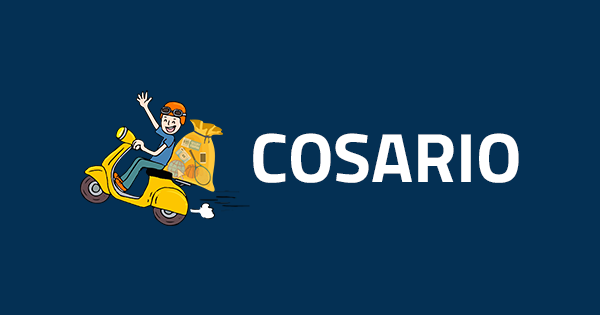
<style>
.page{position:relative;width:600px;height:315px;background:#043054}
.page>*{position:absolute;margin:0}
.t1{font:70px "TitilliumWeb-Bold";color:#ffffff}
</style>
<div class="page">
<p class="t1" style="left:253px;top:133px;width:266px;height:50px">COSARIO</p>
</div>
